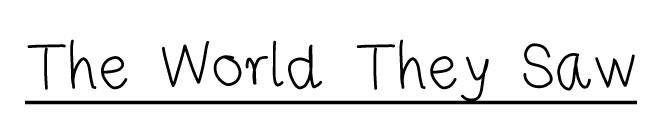
<style>
.page{position:relative;width:663px;height:137px;background:#ffffff}
.page>*{position:absolute;margin:0}
.t1{font:70px "RiseStarHand";color:#000000;text-decoration:underline}
</style>
<div class="page">
<p class="t1" style="left:25px;top:39px;width:612px;height:66px">The World They Saw</p>
</div>
